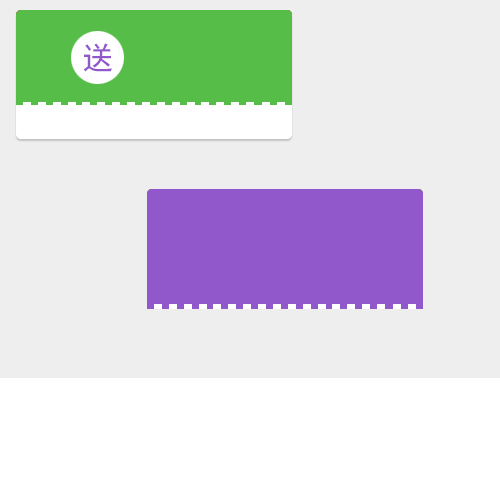
<style>
.page{position:relative;width:500px;height:500px;background:#eeeeee}
.page>*{position:absolute;margin:0}
.t1{font:32px "SimHei";letter-spacing:-0.02em;color:#9158cb}
</style>
<div class="page">
<p class="t1" style="left:83px;top:43px;width:29px;height:29px">送</p>
</div>
